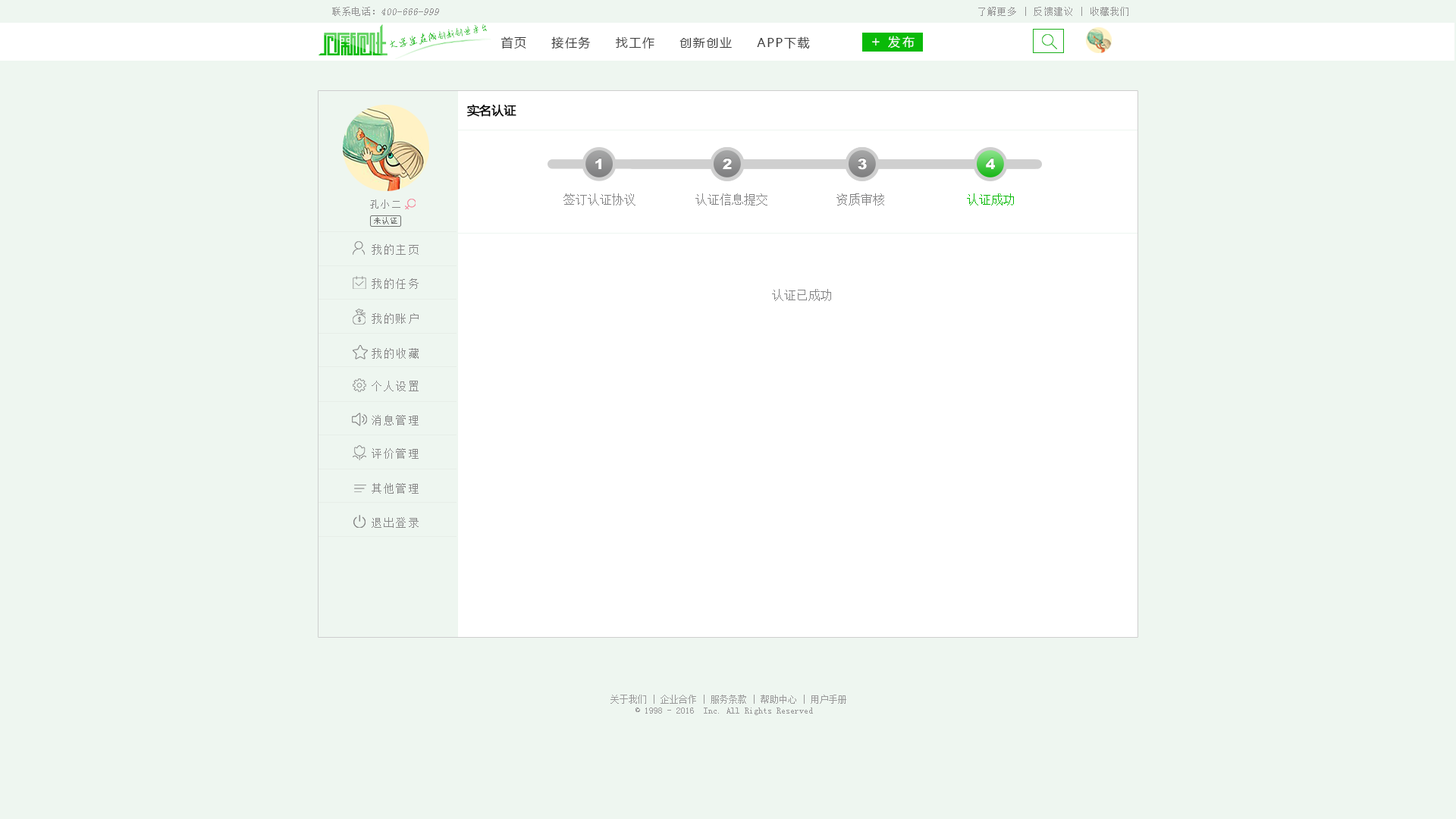
<style>
.page{position:relative;width:1456px;height:819px;background:#eef6f0}
.page>*{position:absolute;margin:0}
.t1{font:10.1px "SimSun";color:#959595;font-style:italic}
.t2{font:10.1px "SimSun";color:#959595}
.t3{font:9.1px "SimSun";letter-spacing:0.1em;color:#959494}
.t4{font:9.4px "AnJingCheng-Xing-2.0";letter-spacing:-0.01em;color:#09ba08}
.t5{font:10.6px "AnJingCheng-Xing-2.0";letter-spacing:-0.01em;color:#09ba08}
.t6{font:12.1px "MicrosoftYaHei";letter-spacing:0.1em;color:#3e3e3e}
.t7{font:14.2px "MicrosoftYaHei";letter-spacing:0.2em;color:#ffffff}
.t8{font:12.1px "MicrosoftYaHei";letter-spacing:0.2em;color:#ffffff}
.t9{font:12.1px "MicrosoftYaHei";letter-spacing:0.01em;color:#000000;font-weight:bold}
.t10{font:14.4px "Arial-Black";color:#ffffff}
.t11{font:12.1px "SimSun";color:#838384}
.t12{font:12.1px "SimSun";color:#09ba08}
.t13{font:10.1px "SimSun";letter-spacing:0.1em;color:#888888}
.t14{font:8.1px "SimSun";color:#727472}
.t15{font:11.1px "SimSun";letter-spacing:0.1em;color:#888888}
.t16{font:9.1px "SimSun";color:#999999}
</style>
<div class="page">
<p class="t1" style="left:332px;top:7px;width:107px;height:9px"><span class="t2">联系电话：</span>400-666-999</p>
<p class="t3" style="left:978px;top:7px;width:150px;height:9px">了解更多 | 反馈建议 | 收藏我们</p>
<p class="t4" style="left:390px;top:24px;width:98px;height:24px;rotate:-10deg"><span class="t5">大学生在线</span>创新创业平台</p>
<p class="t6" style="left:500px;top:36px;width:310px;height:13px">首页     接任务     找工作     创新创业     APP下载</p>
<p class="t7" style="left:872px;top:38px;width:8px;height:7px">+</p>
<p class="t8" style="left:888px;top:36px;width:27px;height:12px">发布</p>
<p class="t9" style="left:467px;top:104px;width:49px;height:13px">实名认证</p>
<p class="t10" style="left:595px;top:158px;width:6px;height:11px">1</p>
<p class="t10" style="left:723px;top:158px;width:9px;height:11px">2</p>
<p class="t10" style="left:858px;top:158px;width:9px;height:12px">3</p>
<p class="t10" style="left:986px;top:158px;width:9px;height:11px">4</p>
<p class="t11" style="left:563px;top:193px;width:72px;height:13px">签订认证协议</p>
<p class="t11" style="left:695px;top:193px;width:72px;height:13px">认证信息提交</p>
<p class="t11" style="left:836px;top:193px;width:48px;height:13px">资质审核</p>
<p class="t12" style="left:967px;top:193px;width:47px;height:13px">认证成功</p>
<p class="t13" style="left:370px;top:199px;width:30px;height:10px">孔小二</p>
<p class="t14" style="left:374px;top:217px;width:23px;height:7px">未认证</p>
<p class="t15" style="left:372px;top:244px;width:47px;height:11px">我的主页</p>
<p class="t15" style="left:372px;top:278px;width:47px;height:11px">我的任务</p>
<p class="t11" style="left:772px;top:289px;width:59px;height:12px">认证已成功</p>
<p class="t15" style="left:372px;top:313px;width:47px;height:11px">我的账户</p>
<p class="t15" style="left:372px;top:348px;width:47px;height:11px">我的收藏</p>
<p class="t15" style="left:372px;top:381px;width:47px;height:10px">个人设置</p>
<p class="t15" style="left:372px;top:415px;width:47px;height:10px">消息管理</p>
<p class="t15" style="left:372px;top:448px;width:47px;height:11px">评价管理</p>
<p class="t15" style="left:372px;top:483px;width:47px;height:11px">其他管理</p>
<p class="t15" style="left:372px;top:517px;width:47px;height:11px">退出登录</p>
<p class="t16" style="left:610px;top:695px;width:236px;height:20px;text-align:center">关于我们 | 企业合作 | 服务条款 | 帮助中心 | 用户手册<br>© 1998 - 2016  Inc. All Rights Reserved</p>
</div>
